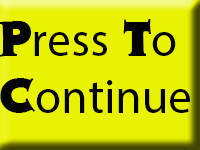
<style>
.page{position:relative;width:200px;height:150px;background:#e9f200}
.page>*{position:absolute;margin:0}
.t1{font:48px "MyriadPro-Regular";color:#030303}
.t2{font:48px "Colbert";color:#030303}
</style>
<div class="page">
<p class="t1" style="left:0px;top:19px;width:190px;height:94px"><span class="t2">P</span>ress<span class="t2"> T</span>o<span class="t2"> C</span>ontinue</p>
</div>
